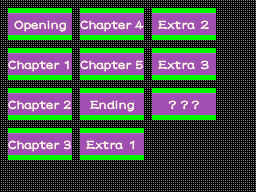
<style>
.page{position:relative;width:256px;height:192px;background:#000000}
.page>*{position:absolute;margin:0}
.t1{font:15.3px/40px "DFLeiShoStd-W5";letter-spacing:0.01em;color:#f8f8e8}
.t2{font:15.3px/40px "DFLeiShoStd-W5";color:#f8f8e8;scale:0.95 1}
.t3{font:15.3px/40px "DFLeiShoStd-W5";color:#f8f8e8}
.t4{font:15.3px/40px "DFLeiShoStd-W5";color:#f8f8e8;scale:0.9 1}
.t5{font:15.3px/40px "DFLeiShoStd-W5";letter-spacing:0.005em;color:#f8f8e8}
.t6{font:15.3px/40px "DFLeiShoStd-W5";letter-spacing:-0.025em;color:#f8f8e8}
.t7{font:15.3px/40px "DFLeiShoStd-W5";letter-spacing:0.025em;color:#f8f8e8}
.t8{font:15.3px/40px "DFLeiShoStd-W5";letter-spacing:0.2em;color:#f8f8e8}
</style>
<div class="page">
<p class="t1" style="left:8px;top:20px;width:63px;height:132px;text-align:center">Opening<br><span class="t2">C</span><span class="t3">hapter </span><span class="t4">1<br></span><span class="t2">C</span><span class="t3">hapter </span><span class="t4">2<br></span><span class="t2">C</span><span class="t3">hapter </span><span class="t4">3</span></p>
<p class="t3" style="left:80px;top:20px;width:64px;height:130px;text-align:center"><span class="t2">C</span>hapter <span class="t4">4<br></span><span class="t2">C</span>hapter <span class="t4">5<br></span><span class="t5">Ending<br></span>E<span class="t6">x</span><span class="t7">t</span>ra 1</p>
<p class="t3" style="left:158px;top:20px;width:51px;height:90px;text-align:center">E<span class="t6">x</span><span class="t7">t</span>ra 2<br>E<span class="t6">x</span><span class="t7">t</span>ra 3<br><span class="t8">???</span></p>
</div>
